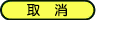
<style>
.page{position:relative;width:128px;height:32px;background:#ffffff}
.page>*{position:absolute;margin:0}
.t1{font:13.3px "FZY3--GB1-4";letter-spacing:0.08em;color:#000000}
</style>
<div class="page">
<p class="t1" style="left:27px;top:3px;width:40px;height:14px">取   消</p>
</div>
